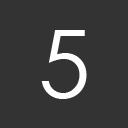
<style>
.page{position:relative;width:128px;height:128px;background:#333333}
.page>*{position:absolute;margin:0}
.t1{font:95.2px "CenturyGothic";color:#ffffff}
</style>
<div class="page">
<p class="t1" style="left:41px;top:30px;width:46px;height:69px">5</p>
</div>
